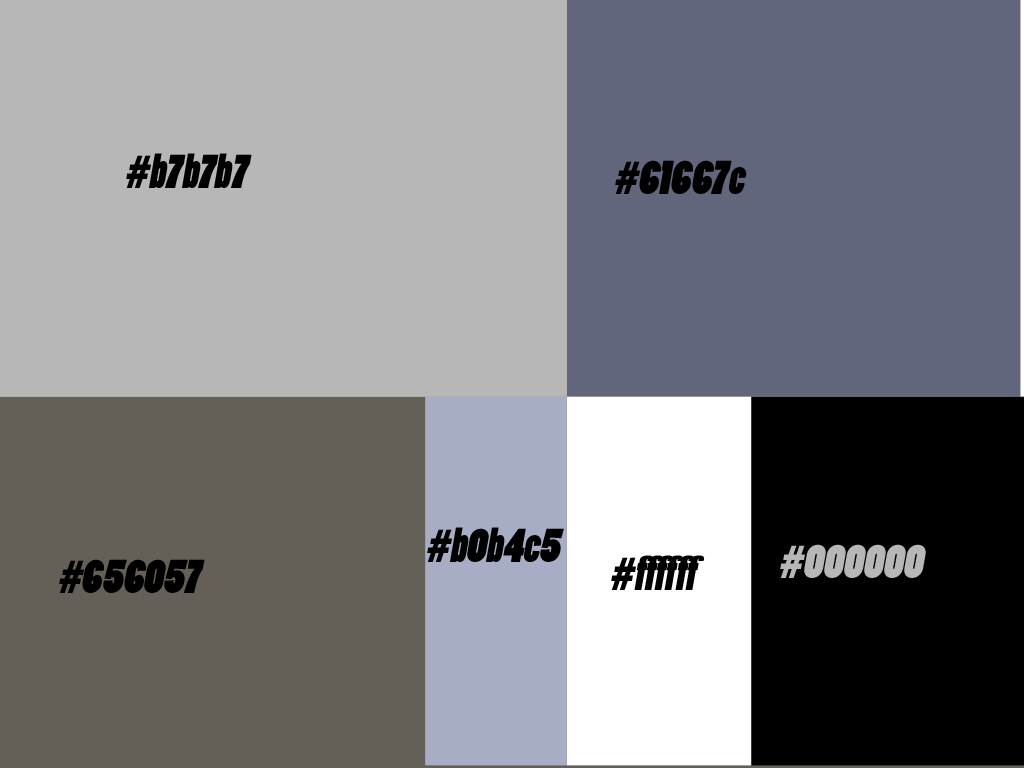
<style>
.page{position:relative;width:1024px;height:768px;background:#b7b7b7}
.page>*{position:absolute;margin:0}
.t1{font:45px "PoplarStd";color:#000000;font-style:italic}
.t2{font:45px "PoplarStd";color:#b7b7b7;font-style:italic}
</style>
<div class="page">
<p class="t1" style="left:126px;top:153px;width:126px;height:35px">#b7b7b7</p>
<p class="t1" style="left:615px;top:160px;width:132px;height:34px">#61667c</p>
<p class="t1" style="left:427px;top:527px;width:137px;height:35px">#b0b4c5</p>
<p class="t2" style="left:780px;top:544px;width:146px;height:34px">#000000</p>
<p class="t1" style="left:611px;top:555px;width:94px;height:35px">#ffffff</p>
<p class="t1" style="left:59px;top:559px;width:146px;height:34px">#656057</p>
</div>
